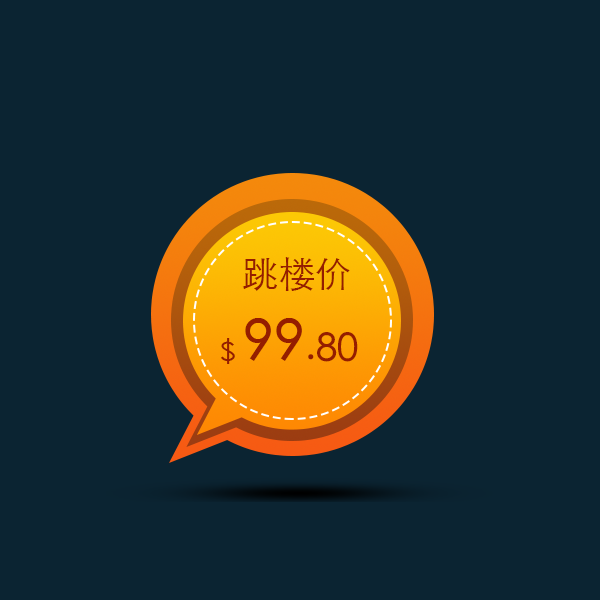
<style>
.page{position:relative;width:600px;height:600px;background:#0b2432}
.page>*{position:absolute;margin:0}
.t1{font:36.5px "STHeitiSC-Light";color:#951d00;text-transform:uppercase}
.t2{font:38.3px "STHeitiSC-Medium";color:#951d00;text-transform:uppercase}
.t3{font:28.2px "STHeitiSC-Light";color:#951d00;text-transform:uppercase}
.t4{font:56.4px "STHeitiSC-Medium";color:#951d00;text-transform:uppercase}
</style>
<div class="page">
<p class="t1" style="left:242px;top:257px;width:108px;height:34px">跳楼价</p>
<p class="t2" style="left:221px;top:318px;width:137px;height:46px"><span class="t3">$ </span><span class="t4">99</span>.80</p>
</div>
